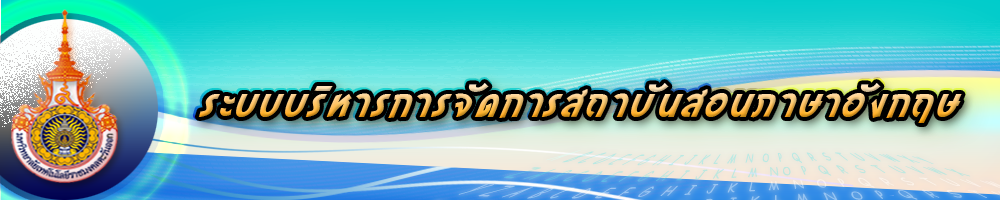
<style>
.page{position:relative;width:1000px;height:200px}
.page>*{position:absolute;margin:0}
.t1{font:33px "SarunsIndiannajone";letter-spacing:0.075em;font-weight:bold}
.t2{font:33px "SarunsIndiannajone";letter-spacing:0.1em}
</style>
<div class="page">
<p class="t1" style="left:196px;top:81px;width:767px;height:41px">ระบบบริหารการจัดการสถาบันสอนภาษาอังกฤษ</p>
<p class="t2" style="left:198px;top:83px;width:764px;height:40px">ระบบบริหารการจัดการสถาบันสอนภาษาอังกฤษ</p>
</div>
